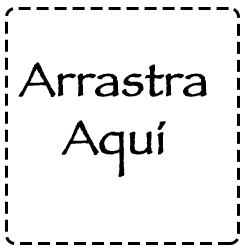
<style>
.page{position:relative;width:250px;height:250px;background:#ffffff}
.page>*{position:absolute;margin:0}
.t1{font:48px "Papyrus";color:#000000;font-weight:bold}
</style>
<div class="page">
<p class="t1" style="left:18px;top:62px;width:189px;height:115px;text-align:center">Arrastra<br>Aquí</p>
</div>
